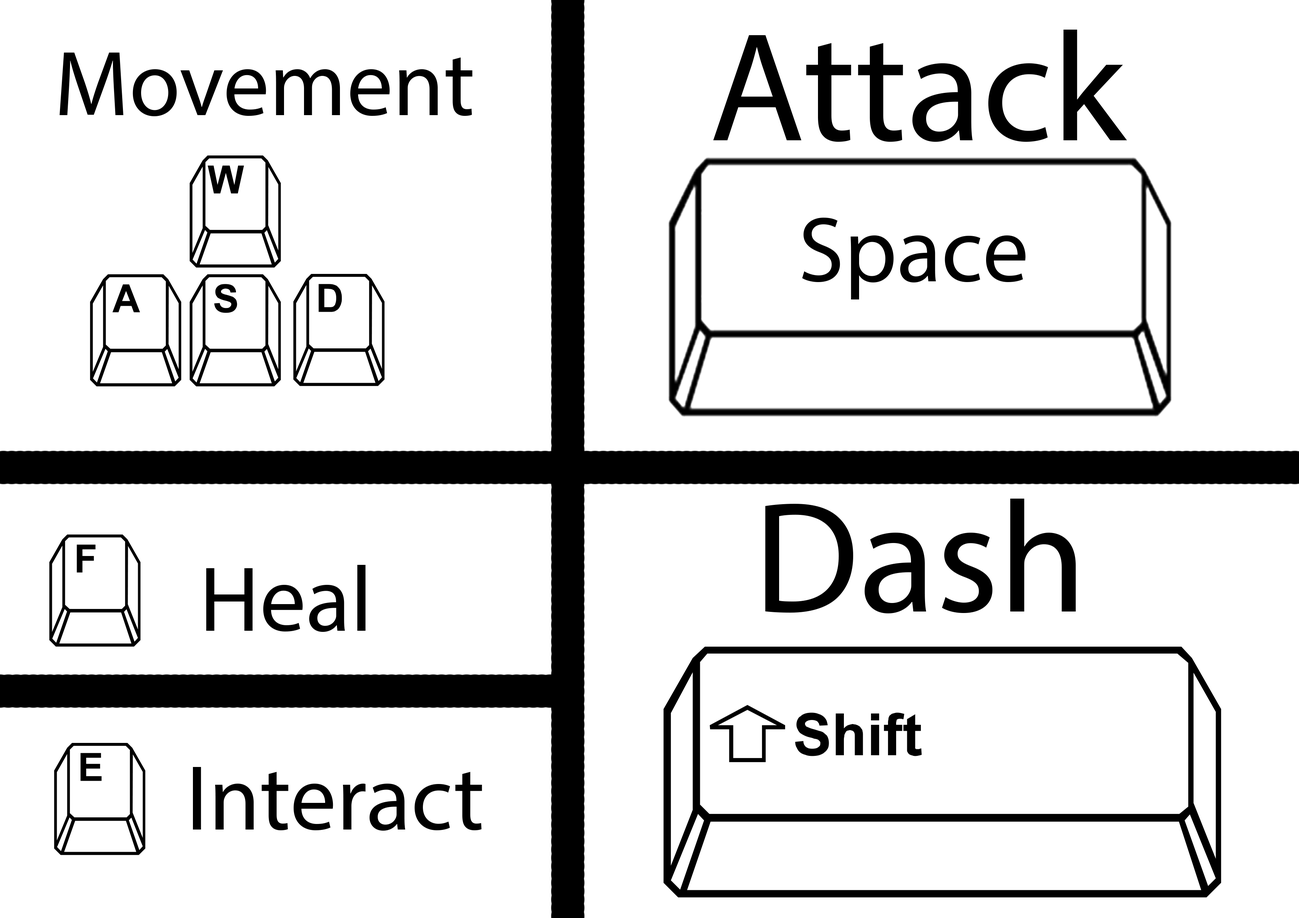
<style>
.page{position:relative;width:1299px;height:918px;background:#ffffff}
.page>*{position:absolute;margin:0}
.t1{font:156.1px "MyriadPro-Regular";color:#000000}
.t2{font:92.6px "MyriadPro-Regular";color:#000000}
.t3{font:92.6px "Key Normal © SD 1994";color:#000000}
.t4{font:158.9px "MyriadPro-Regular";color:#000000}
</style>
<div class="page">
<p class="t1" style="left:713px;top:30px;width:414px;height:112px">Attack</p>
<p class="t2" style="left:60px;top:53px;width:412px;height:63px">Movement</p>
<p class="t3" style="left:190px;top:155px;width:91px;height:113px">w</p>
<p class="t2" style="left:802px;top:218px;width:224px;height:82px">Space</p>
<p class="t3" style="left:90px;top:274px;width:91px;height:113px">a</p>
<p class="t3" style="left:190px;top:274px;width:91px;height:113px">s</p>
<p class="t3" style="left:293px;top:274px;width:92px;height:112px">d</p>
<p class="t4" style="left:765px;top:499px;width:310px;height:115px">Dash</p>
<p class="t3" style="left:49px;top:535px;width:92px;height:112px">f</p>
<p class="t2" style="left:206px;top:565px;width:159px;height:67px">Heal</p>
<p class="t3" style="left:54px;top:743px;width:91px;height:112px">e</p>
<p class="t2" style="left:193px;top:767px;width:289px;height:64px">Interact</p>
</div>
